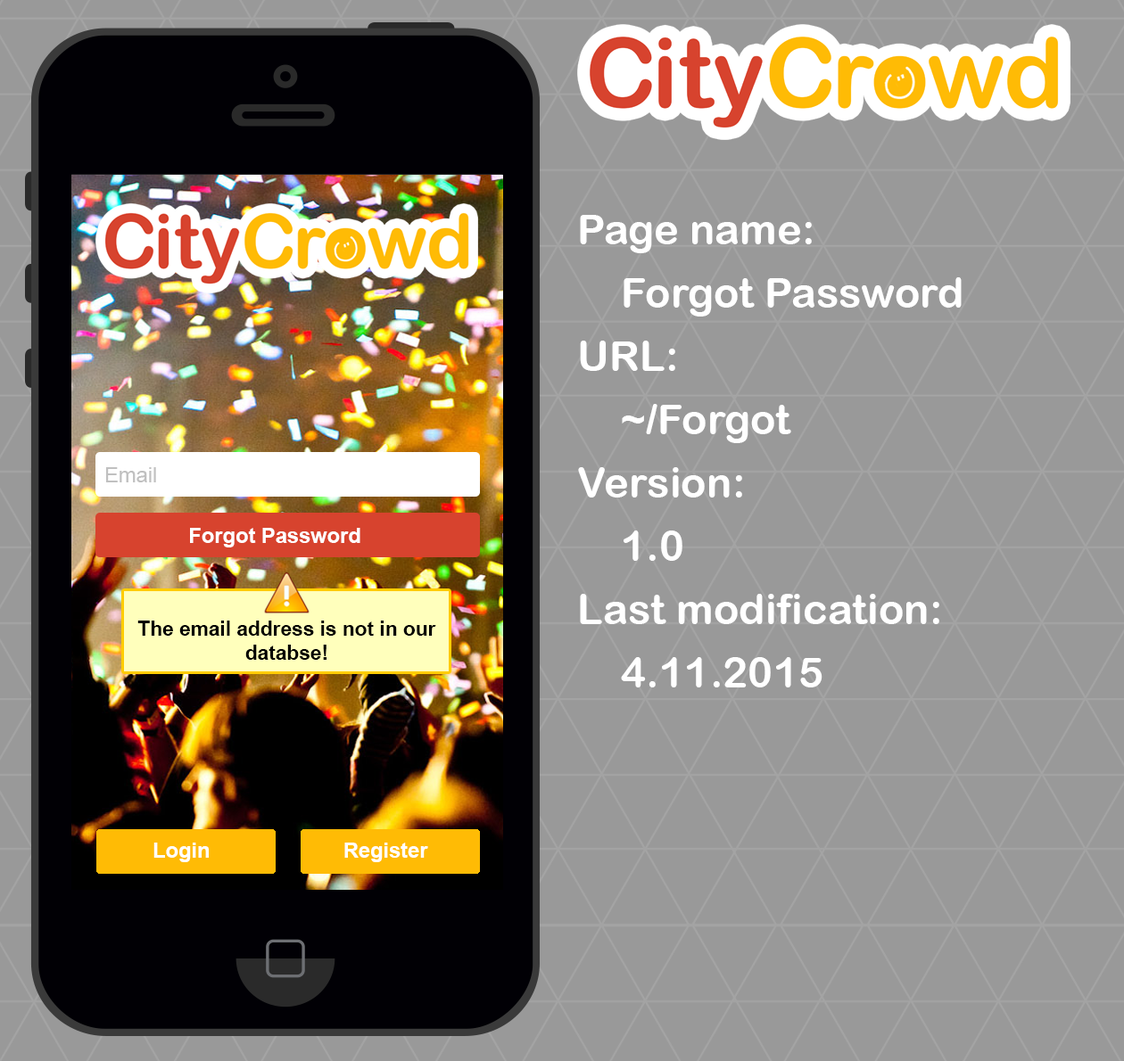
<style>
.page{position:relative;width:1124px;height:1061px;background:#999999}
.page>*{position:absolute;margin:0}
.t1{font:42.2px/63.3px "ArialRoundedMTBold";color:#ffffff}
.t2{font:21.1px "ArialMT";color:#c0c0c0}
.t3{font:21.1px "Arial-BoldMT";color:#ffffff}
.t4{font:20.2px "Arial-BoldMT";color:#000000}
</style>
<div class="page">
<p class="t1" style="left:578px;top:215px;width:383px;height:473px">Page name:<br>Forgot Password<br>URL:<br>~/Forgot<br>Version:<br>1.0<br>Last modification:<br>4.11.2015</p>
<p class="t2" style="left:105px;top:467px;width:51px;height:15px">Email</p>
<p class="t3" style="left:190px;top:528px;width:170px;height:20px">Forgot Password</p>
<p class="t4" style="left:137px;top:621px;width:299px;height:39px;text-align:center">The email address is not in our databse!</p>
<p class="t3" style="left:153px;top:843px;width:56px;height:19px">Login</p>
<p class="t3" style="left:344px;top:843px;width:84px;height:19px">Register</p>
</div>
